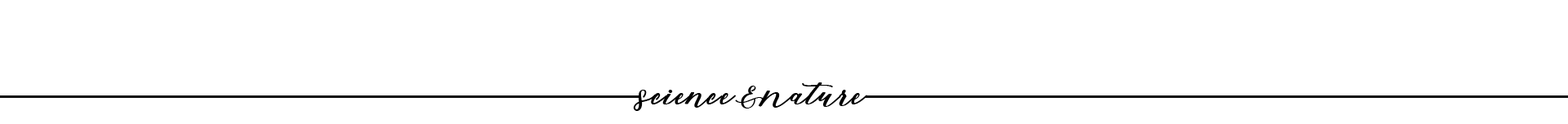
<style>
.page{position:relative;width:1568px;height:124px;background:#ffffff}
.page>*{position:absolute;margin:0}
.t1{font:28.6px "IsabellaScript";color:#000000}
</style>
<div class="page">
<p class="t1" style="left:633px;top:82px;width:234px;height:29px">Science&amp;Nature</p>
</div>
